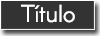
<style>
.page{position:relative;width:100px;height:36px;background:#333333}
.page>*{position:absolute;margin:0}
.t1{font:24px "Arcon-Regular";color:#ffffff}
</style>
<div class="page">
<p class="t1" style="left:21px;top:4px;width:54px;height:19px">Título</p>
</div>
